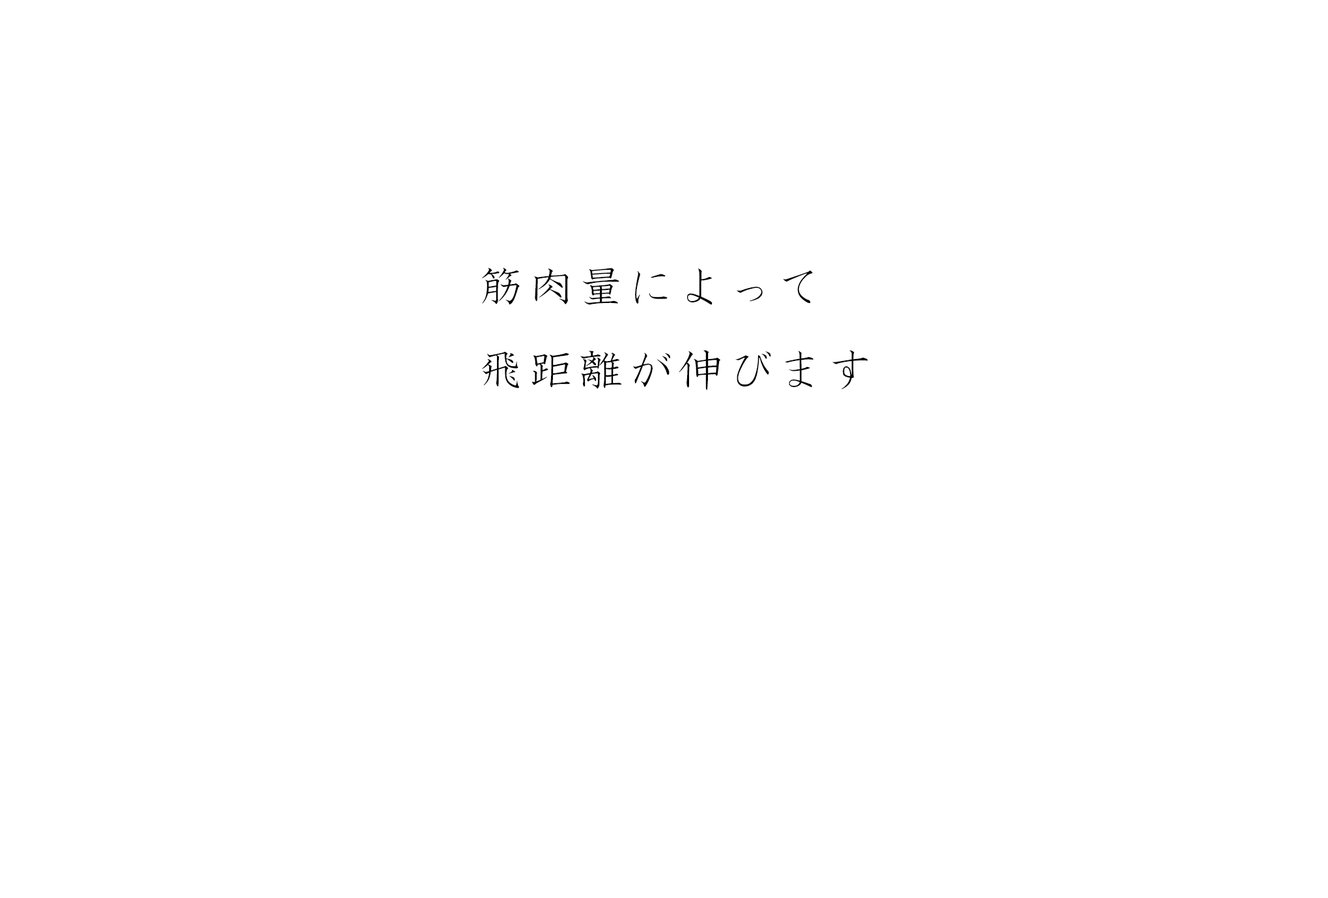
<style>
.page{position:relative;width:1328px;height:898px;background:#ffffff}
.page>*{position:absolute;margin:0}
.t1{font:47.6px "HGSKyokashotai";letter-spacing:0.05em;color:#000000}
</style>
<div class="page">
<p class="t1" style="left:482px;top:268px;width:386px;height:122px;text-align:justify">筋肉量によって<br>飛距離が伸びます</p>
</div>
